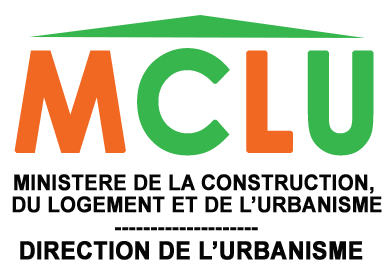
<style>
.page{position:relative;width:392px;height:270px;background:#ffffff}
.page>*{position:absolute;margin:0}
.t1{font:137.2px "CenturyGothic-Bold";letter-spacing:0.02em;color:#f16823;font-weight:bold;scale:0.93 1}
.t2{font:137.2px "CenturyGothic-Bold";letter-spacing:0.02em;color:#36b64d;font-weight:bold;scale:0.93 1}
.t3{font:21.6px/22px "Arial-BoldMT";color:#050605;font-weight:bold;scale:0.93 1}
.t4{font:21.6px "Arial-BoldMT";color:#050605;font-weight:bold;scale:0.93 1}
.t5{font:24.9px "Arial-BoldMT";color:#050605;font-weight:bold;scale:0.93 1}
</style>
<div class="page">
<p class="t1" style="left:14px;top:48px;width:360px;height:108px">M<span class="t2">C</span>L<span class="t2">U</span></p>
<p class="t3" style="left:12px;top:174px;width:370px;height:39px;text-align:center">MINISTERE DE LA CONSTRUCTION, <br>DU LOGEMENT ET DE L’URBANISME</p>
<p class="t4" style="left:115px;top:227px;width:143px;height:4px">--------------------</p>
<p class="t5" style="left:20px;top:241px;width:343px;height:19px">DIRECTION DE L’URBANISME</p>
</div>
